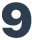
<style>
.page{position:relative;width:32px;height:40px;background:#2f3e4e}
.page>*{position:absolute;margin:0}
.t1{font:48px "SFProDisplay-Black";color:#2f3e4e}
</style>
<div class="page">
<p class="t1" style="left:2px;top:2px;width:30px;height:36px">9</p>
</div>
